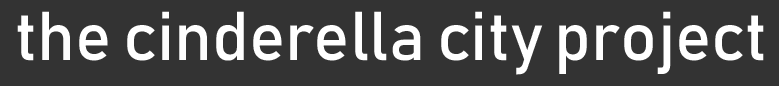
<style>
.page{position:relative;width:779px;height:86px;background:#333333}
.page>*{position:absolute;margin:0}
.t1{font:68px "Bahnschrift";color:#ffffff}
</style>
<div class="page">
<p class="t1" style="left:17px;top:11px;width:747px;height:64px">the cinderella city project</p>
</div>
